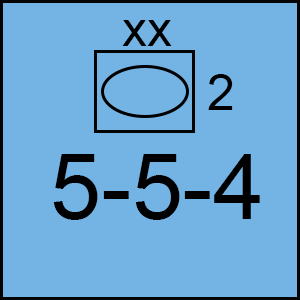
<style>
.page{position:relative;width:300px;height:300px;background:#74b4e4}
.page>*{position:absolute;margin:0}
.t1{font:50px "ArialMT";color:#000000}
.t2{font:91.7px "ArialMT";color:#000000}
</style>
<div class="page">
<p class="t1" style="left:122px;top:20px;width:50px;height:26px">xx</p>
<p class="t1" style="left:208px;top:74px;width:25px;height:36px">2</p>
<p class="t2" style="left:53px;top:154px;width:207px;height:66px">5-5-4</p>
</div>
